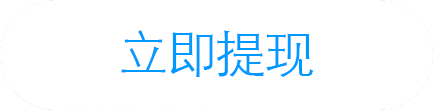
<style>
.page{position:relative;width:433px;height:111px;background:#ffffff}
.page>*{position:absolute;margin:0}
.t1{font:50.8px "STXihei";letter-spacing:-0.045em;color:#0099ff}
</style>
<div class="page">
<p class="t1" style="left:121px;top:30px;width:193px;height:47px">立即提现</p>
</div>
